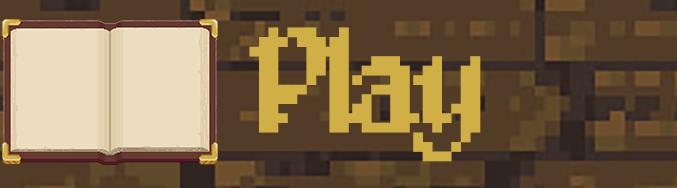
<style>
.page{position:relative;width:677px;height:188px}
.page>*{position:absolute;margin:0}
.t1{font:152.4px "Alagard";letter-spacing:-0.1em;color:#cfaf46}
</style>
<div class="page">
<p class="t1" style="left:249px;top:27px;width:232px;height:135px">Play</p>
</div>
